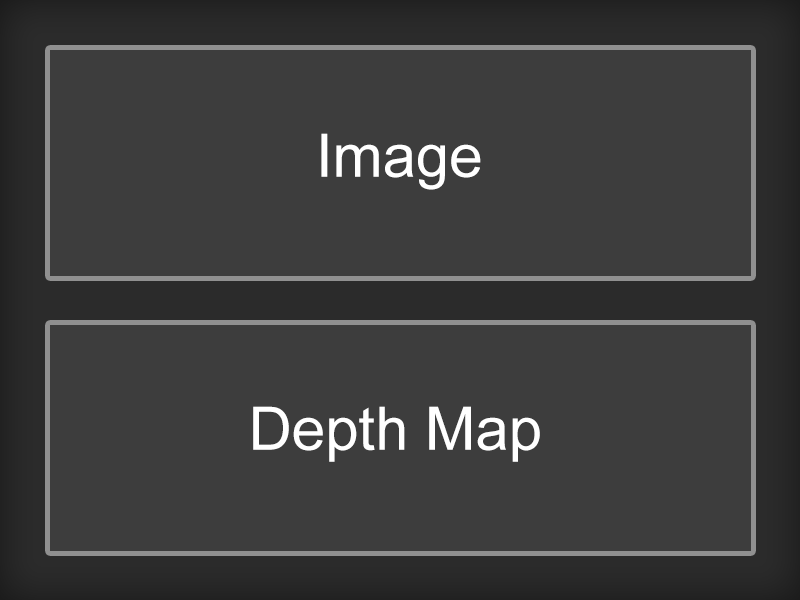
<style>
.page{position:relative;width:800px;height:600px;background:#3d3d3d}
.page>*{position:absolute;margin:0}
.t1{font:60px "ArialMT";color:#ffffff}
</style>
<div class="page">
<p class="t1" style="left:321px;top:133px;width:160px;height:57px">Image</p>
<p class="t1" style="left:253px;top:406px;width:287px;height:56px">Depth Map</p>
</div>
